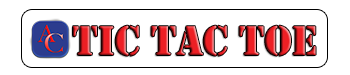
<style>
.page{position:relative;width:350px;height:75px;background:#ffffff}
.page>*{position:absolute;margin:0}
.t1{font:43px "Stencil"}
</style>
<div class="page">
<p class="t1" style="left:73px;top:25px;width:243px;height:31px">TiC TAC TOE</p>
</div>
